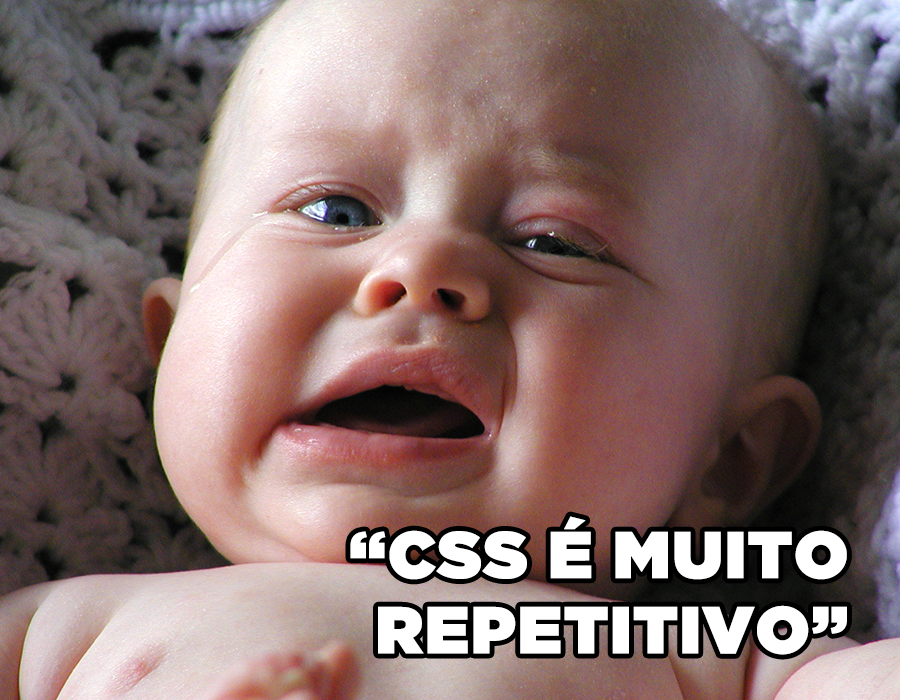
<style>
.page{position:relative;width:900px;height:700px}
.page>*{position:absolute;margin:0}
.t1{font:66.1px/75.1px "GothamUltra";color:#ffffff;font-weight:bold}
</style>
<div class="page">
<p class="t1" style="left:350px;top:516px;width:497px;height:139px;text-align:right">“CSS É MUITO<br>REPETITIVO”</p>
</div>
